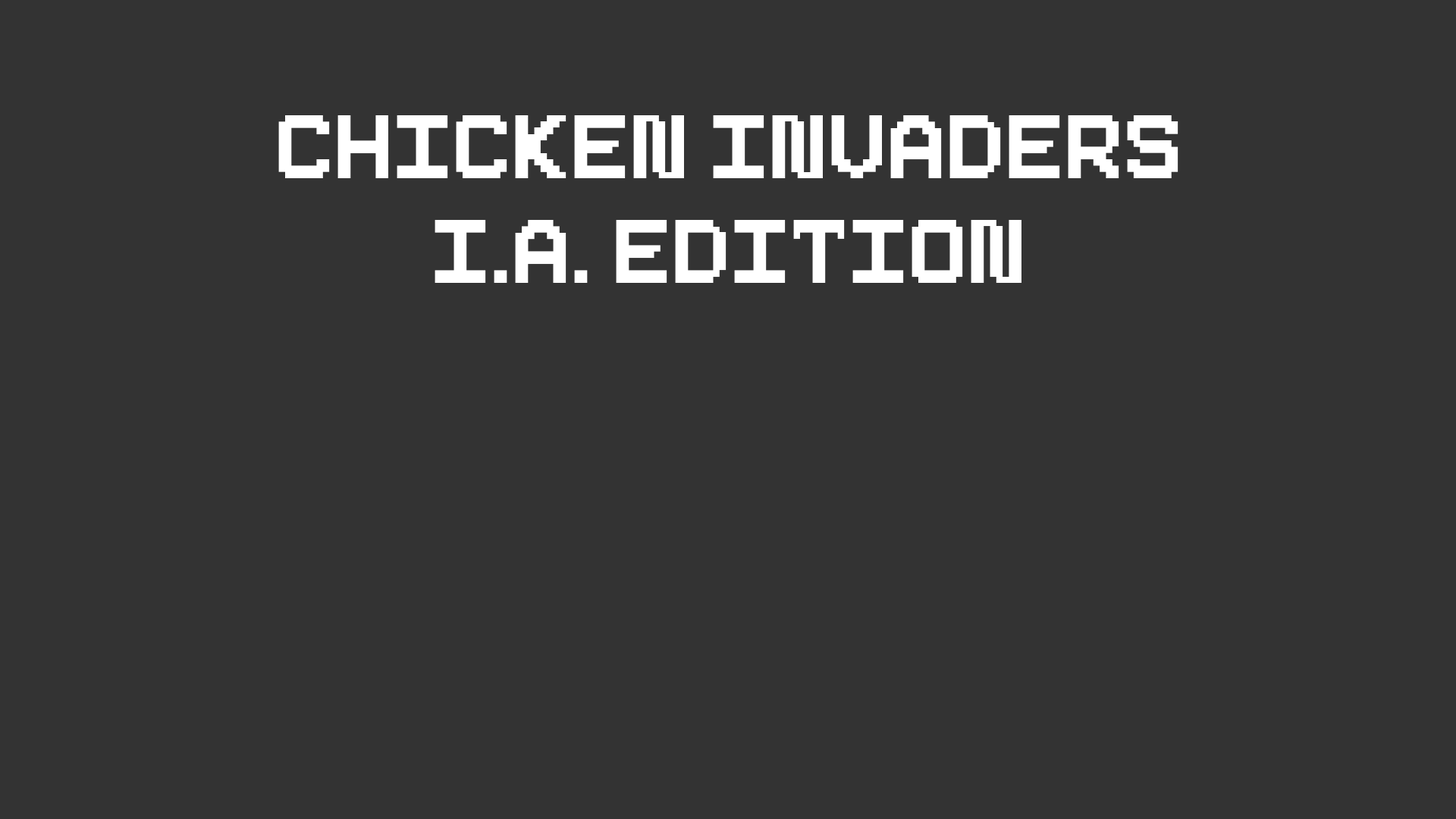
<style>
.page{position:relative;width:1456px;height:819px;background:#333333}
.page>*{position:absolute;margin:0}
.t1{font:125px "Pixeboy";color:#ffffff;text-transform:uppercase}
</style>
<div class="page">
<p class="t1" style="left:278px;top:115px;width:900px;height:63px">chicken invaders</p>
<p class="t1" style="left:435px;top:220px;width:586px;height:63px">i.a. edition</p>
</div>
